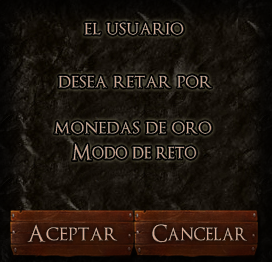
<style>
.page{position:relative;width:272px;height:262px}
.page>*{position:absolute;margin:0}
.t1{font:21.1px "OptimusPrinceps";color:#d3aa95;scale:1.04 1}
.t2{font:21.1px "OptimusPrinceps";color:#d3a790;scale:1.04 1}
.t3{font:21.1px "OptimusPrinceps";color:#d3a893;scale:1.04 1}
.t4{font:21.1px "OptimusPrinceps";scale:0.93 1}
.t5{font:23px "OptimusPrinceps";color:#d7a891;scale:1.05 1}
.t6{font:23px "OptimusPrinceps";color:#d8a790;scale:0.94 1}
</style>
<div class="page">
<p class="t1" style="left:84px;top:22px;width:100px;height:13px">el usuario</p>
<p class="t2" style="left:58px;top:75px;width:154px;height:13px">desea retar por</p>
<p class="t3" style="left:54px;top:121px;width:158px;height:13px">monedas de oro</p>
<p class="t4" style="left:72px;top:143px;width:125px;height:18px">Modo de reto</p>
<p class="t5" style="left:27px;top:224px;width:91px;height:19px">Aceptar</p>
<p class="t6" style="left:152px;top:224px;width:95px;height:19px">Cancelar</p>
</div>
